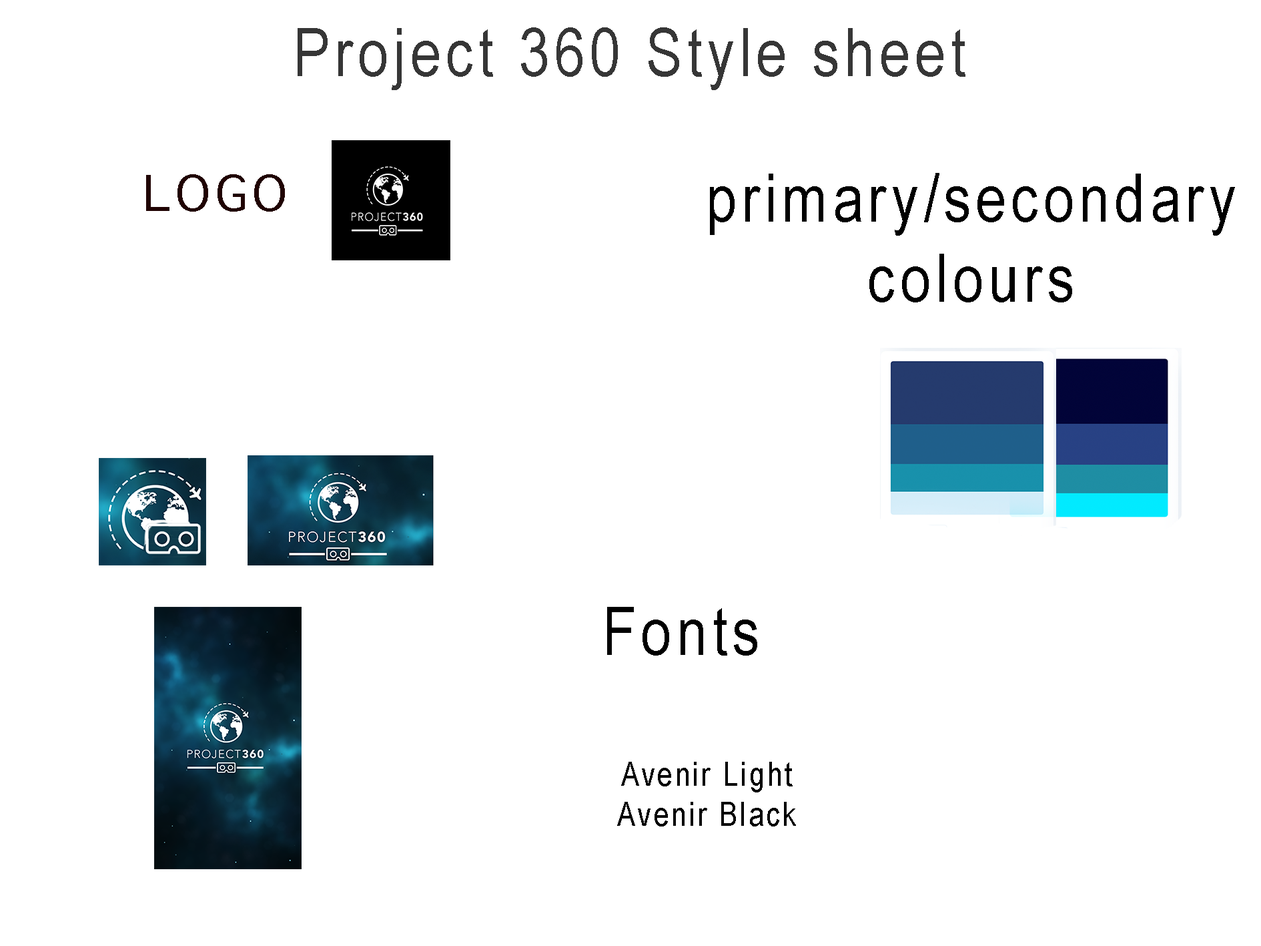
<style>
.page{position:relative;width:1261px;height:946px;background:#ffffff}
.page>*{position:absolute;margin:0}
.t1{font:66.7px "ArialNarrow";letter-spacing:0.075em;color:#363636}
.t2{font:66.7px "ArialNarrow";letter-spacing:0.075em;color:#000000}
.t3{font:66.7px "AppleSymbols";letter-spacing:0.075em;color:#200202}
.t4{font:33.4px "ArialNarrow";letter-spacing:0.075em;color:#000000}
</style>
<div class="page">
<p class="t1" style="left:298px;top:27px;width:668px;height:63px">Project 360 Style sheet</p>
<p class="t2" style="left:710px;top:173px;width:525px;height:129px;text-align:center">primary/secondary<br>colours</p>
<p class="t3" style="left:146px;top:174px;width:139px;height:38px">LOGO</p>
<p class="t2" style="left:607px;top:607px;width:150px;height:48px">Fonts</p>
<p class="t4" style="left:617px;top:761px;width:179px;height:65px;text-align:center">Avenir Light <br>Avenir Black</p>
</div>
